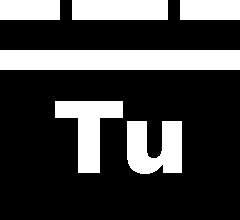
<style>
.page{position:relative;width:240px;height:220px;background:#000000}
.page>*{position:absolute;margin:0}
.t1{font:12px "Arial-Black";color:#ffffff}
</style>
<div class="page">
<p class="t1" style="left:55px;top:101px;width:127px;height:73px;text-align:center">Tu</p>
</div>
